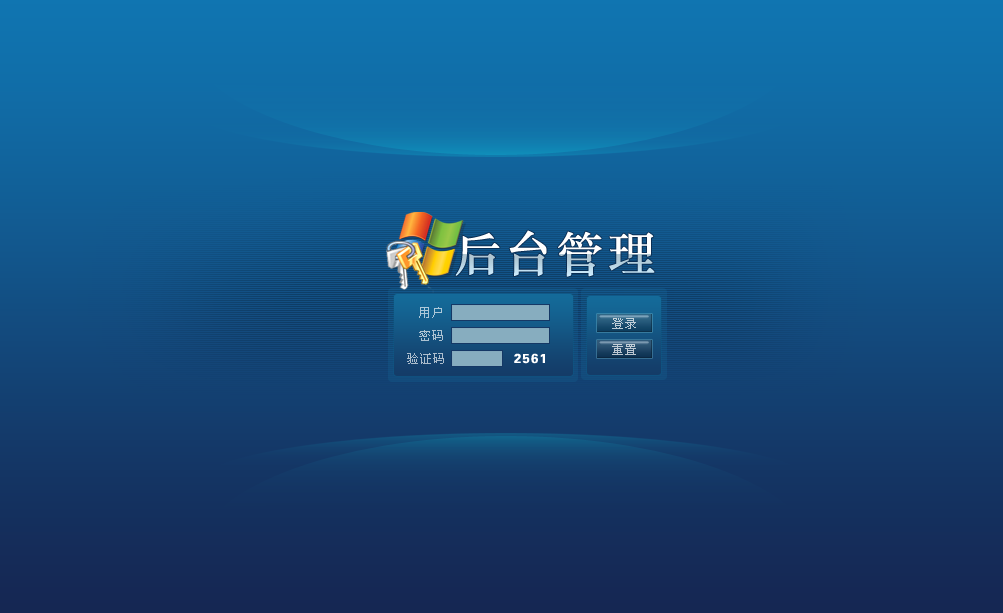
<style>
.page{position:relative;width:1003px;height:613px}
.page>*{position:absolute;margin:0}
.t1{font:48px "STZhongsong";letter-spacing:0.075em}
.t2{font:12px "SimSun";letter-spacing:0.1em;color:#adc9d9}
.t3{font:12px "SimSun";letter-spacing:0.1em;color:#becdd7}
.t4{font:12px "SimSun";letter-spacing:0.1em;color:#adc3d3}
.t5{font:12px "SimSun";letter-spacing:0.1em;color:#adbecd}
.t6{font:13px "FZH4FW--GB1-0";letter-spacing:0.1em;color:#ffffff}
.t7{font:12px "SimSun";letter-spacing:0.1em;color:#bec9d3}
</style>
<div class="page">
<p class="t1" style="left:455px;top:230px;width:200px;height:47px">后台管理</p>
<p class="t2" style="left:419px;top:307px;width:23px;height:11px">用户</p>
<p class="t3" style="left:612px;top:318px;width:24px;height:11px">登录</p>
<p class="t4" style="left:419px;top:330px;width:24px;height:11px">密码</p>
<p class="t5" style="left:407px;top:353px;width:37px;height:11px">验证码</p>
<p class="t6" style="left:514px;top:353px;width:31px;height:11px">2561</p>
<p class="t7" style="left:612px;top:344px;width:24px;height:11px">重置</p>
</div>
